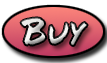
<style>
.page{position:relative;width:107px;height:63px;background:#ffffff}
.page>*{position:absolute;margin:0}
.t1{font:37.3px "PermanentMarker"}
</style>
<div class="page">
<p class="t1" style="left:20px;top:17px;width:68px;height:29px">Buy</p>
</div>
